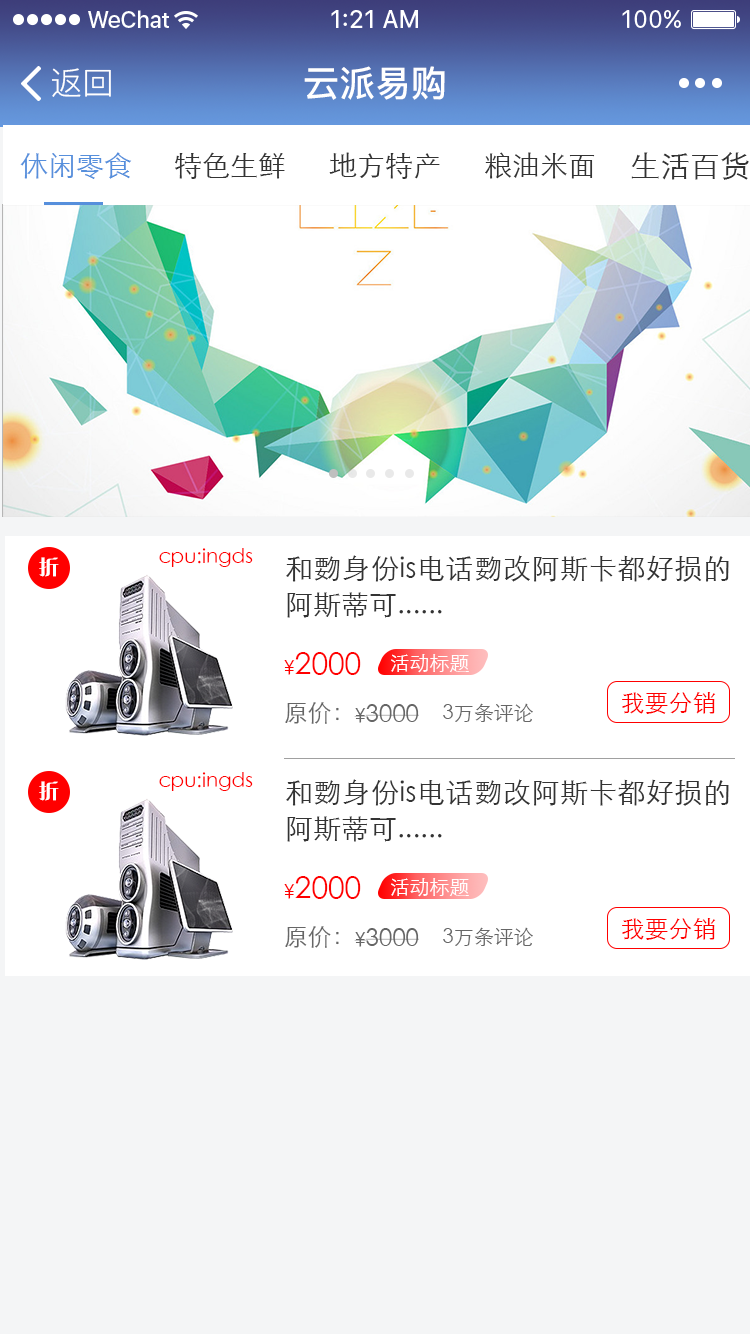
<style>
.page{position:relative;width:750px;height:1334px;background:#ffffff}
.page>*{position:absolute;margin:0}
.t1{font:32px "PingFang-SC-Regular";color:#ffffff}
.t2{font:36px "PingFang-SC-Bold";color:#ffffff}
.t3{font:28px "STXihei";color:#568fdc}
.t4{font:28px "STXihei";color:#333333}
.t5{font:30px "STXihei";color:#333333}
.t6{font:20px "FZCQJW--GB1-0";color:#ffffff}
.t7{font:20px "STXihei";color:#ff0000}
.t8{font:28px/36px "STXihei";color:#333333}
.t9{font:30px "STXihei";color:#ff0000}
.t10{font:20px "STXihei";color:#ffffff}
.t11{font:24px "STXihei";color:#666666}
.t12{font:24px "STXihei";color:#ff0000}
.t13{font:20px "STXihei";color:#666666}
</style>
<div class="page">
<p class="t1" style="left:52px;top:68px;width:59px;height:29px">返回</p>
<p class="t2" style="left:304px;top:66px;width:141px;height:34px">云派易购</p>
<p class="t3" style="left:20px;top:152px;width:112px;height:27px">休闲零食</p>
<p class="t4" style="left:175px;top:152px;width:110px;height:27px">特色生鲜</p>
<p class="t4" style="left:329px;top:152px;width:111px;height:27px">地方特产</p>
<p class="t4" style="left:485px;top:152px;width:110px;height:27px">粮油米面</p>
<p class="t5" style="left:631px;top:152px;width:118px;height:28px">生活百货</p>
<p class="t6" style="left:39px;top:557px;width:20px;height:20px">折</p>
<p class="t7" style="left:159px;top:548px;width:94px;height:19px">cpu:ingds</p>
<p class="t8" style="left:286px;top:555px;width:443px;height:63px;text-align:justify">和覅身份is电话覅改阿斯卡都好损的阿斯蒂可......</p>
<p class="t9" style="left:284px;top:652px;width:77px;height:23px"><span class="t7">¥</span>2000</p>
<p class="t10" style="left:391px;top:654px;width:78px;height:19px">活动标题</p>
<p class="t11" style="left:285px;top:702px;width:54px;height:22px">原价：</p>
<p class="t12" style="left:622px;top:692px;width:94px;height:22px">我要分销</p>
<p class="t11" style="left:354px;top:704px;width:65px;height:19px"><span class="t13">¥</span>3000</p>
<p class="t13" style="left:443px;top:703px;width:90px;height:19px">3万条评论</p>
<p class="t7" style="left:159px;top:772px;width:94px;height:19px">cpu:ingds</p>
<p class="t6" style="left:39px;top:781px;width:20px;height:20px">折</p>
<p class="t8" style="left:286px;top:779px;width:443px;height:63px;text-align:justify">和覅身份is电话覅改阿斯卡都好损的阿斯蒂可......</p>
<p class="t9" style="left:284px;top:876px;width:77px;height:23px"><span class="t7">¥</span>2000</p>
<p class="t10" style="left:391px;top:878px;width:78px;height:19px">活动标题</p>
<p class="t12" style="left:622px;top:918px;width:94px;height:22px">我要分销</p>
<p class="t11" style="left:285px;top:926px;width:54px;height:22px">原价：</p>
<p class="t11" style="left:354px;top:928px;width:65px;height:19px"><span class="t13">¥</span>3000</p>
<p class="t13" style="left:443px;top:927px;width:90px;height:19px">3万条评论</p>
</div>
